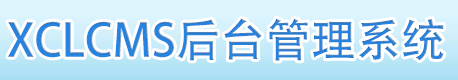
<style>
.page{position:relative;width:458px;height:80px}
.page>*{position:absolute;margin:0}
.t1{font:45px "AdobeHeitiStd-Regular";color:#2685e3}
</style>
<div class="page">
<p class="t1" style="left:8px;top:18px;width:436px;height:43px">XCLCMS后台管理系统</p>
</div>
